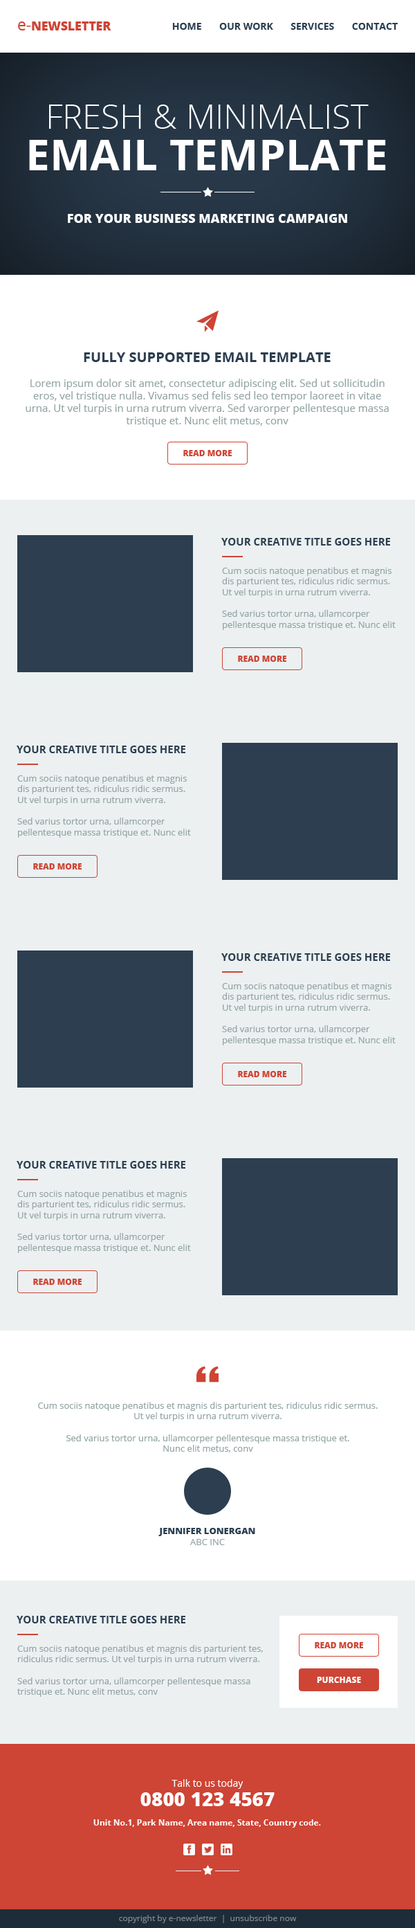
<style>
.page{position:relative;width:415px;height:1928px;background:#ecf0f1}
.page>*{position:absolute;margin:0}
.t1{font:12.2px "OpenSans-Extrabold";color:#ce4435;text-transform:uppercase}
.t2{font:15.7px "OpenSans";color:#ce4435}
.t3{font:9.7px "OpenSans-Bold";color:#2c3e50}
.t4{font:33.9px/41.5px "OpenSans-Light";color:#ffffff;text-transform:uppercase}
.t5{font:42.9px/41.5px "OpenSans-Bold";color:#ffffff;text-transform:uppercase}
.t6{font:12.5px "OpenSans-Extrabold";color:#ffffff;text-transform:uppercase}
.t7{font:13.8px "OpenSans-Bold";color:#2c3e50;text-transform:uppercase}
.t8{font:10.4px "OpenSans";color:#95a5a6}
.t9{font:8.3px "OpenSans-Extrabold";color:#ce4435;text-transform:uppercase}
.t10{font:10.4px "OpenSans-Bold";color:#2c3e50;text-transform:uppercase}
.t11{font:9px "OpenSans";color:#95a5a6}
.t12{font:9px "OpenSans-Extrabold";color:#2c3e50;text-transform:uppercase}
.t13{font:8.3px "OpenSans-Extrabold";color:#ffffff;text-transform:uppercase}
.t14{font:9.7px/19.4px "OpenSans";color:#ffffff}
.t15{font:19.4px/19.4px "OpenSans-Extrabold";color:#ffffff}
.t16{font:8.3px "OpenSans-Bold";color:#ffffff}
.t17{font:8.3px "OpenSans";color:#7f8c8d}
</style>
<div class="page">
<p class="t1" style="left:18px;top:21px;width:93px;height:9px"><span class="t2">e-</span>newsletter</p>
<p class="t3" style="left:172px;top:23px;width:226px;height:7px">HOME       OUR WORK       SERVICES       CONTACT</p>
<p class="t4" style="left:29px;top:105px;width:357px;height:65px;text-align:center">fresh &amp; minimalist<br><span class="t5">email template</span></p>
<p class="t6" style="left:68px;top:214px;width:280px;height:9px">for Your Business Marketing Campaign</p>
<p class="t7" style="left:84px;top:352px;width:247px;height:10px">fully supported email template</p>
<p class="t8" style="left:26px;top:379px;width:363px;height:48px;text-align:center">Lorem ipsum dolor sit amet, consectetur adipiscing elit. Sed ut sollicitudin eros, vel tristique nulla. Vivamus sed felis sed leo tempor laoreet in vitae urna. Ut vel turpis in urna rutrum viverra. Sed varorper pellentesque massa tristique et. Nunc elit metus, conv</p>
<p class="t9" style="left:183px;top:450px;width:49px;height:6px">READ MORE</p>
<p class="t10" style="left:222px;top:538px;width:168px;height:8px">your creative TITLE GOES HERE</p>
<p class="t11" style="left:222px;top:567px;width:174px;height:63px">Cum sociis natoque penatibus et magnis dis parturient tes, ridiculus ridic sermus. Ut vel turpis in urna rutrum viverra. <br><br>Sed varius tortor urna, ullamcorper pellentesque massa tristique et. Nunc elit metus, conv</p>
<p class="t9" style="left:238px;top:656px;width:49px;height:6px">READ MORE</p>
<p class="t10" style="left:17px;top:746px;width:169px;height:7px">your creative TITLE GOES HERE</p>
<p class="t11" style="left:17px;top:775px;width:174px;height:63px">Cum sociis natoque penatibus et magnis dis parturient tes, ridiculus ridic sermus. Ut vel turpis in urna rutrum viverra. <br><br>Sed varius tortor urna, ullamcorper pellentesque massa tristique et. Nunc elit metus, conv</p>
<p class="t9" style="left:33px;top:863px;width:49px;height:7px">READ MORE</p>
<p class="t10" style="left:222px;top:953px;width:168px;height:8px">your creative TITLE GOES HERE</p>
<p class="t11" style="left:222px;top:982px;width:174px;height:63px">Cum sociis natoque penatibus et magnis dis parturient tes, ridiculus ridic sermus. Ut vel turpis in urna rutrum viverra. <br><br>Sed varius tortor urna, ullamcorper pellentesque massa tristique et. Nunc elit metus, conv</p>
<p class="t9" style="left:238px;top:1071px;width:49px;height:6px">READ MORE</p>
<p class="t10" style="left:17px;top:1161px;width:169px;height:8px">your creative TITLE GOES HERE</p>
<p class="t11" style="left:17px;top:1190px;width:174px;height:63px">Cum sociis natoque penatibus et magnis dis parturient tes, ridiculus ridic sermus. Ut vel turpis in urna rutrum viverra. <br><br>Sed varius tortor urna, ullamcorper pellentesque massa tristique et. Nunc elit metus, conv</p>
<p class="t9" style="left:33px;top:1279px;width:49px;height:6px">READ MORE</p>
<p class="t11" style="left:38px;top:1402px;width:340px;height:50px;text-align:center">Cum sociis natoque penatibus et magnis dis parturient tes, ridiculus ridic sermus. Ut vel turpis in urna rutrum viverra. <br><br>Sed varius tortor urna, ullamcorper pellentesque massa tristique et. <br>Nunc elit metus, conv</p>
<p class="t12" style="left:159px;top:1528px;width:96px;height:17px;text-align:center">jennifer lonergan<br><span class="t11">ABC INC</span></p>
<p class="t10" style="left:17px;top:1616px;width:169px;height:7px">your creative TITLE GOES HERE</p>
<p class="t11" style="left:17px;top:1645px;width:246px;height:52px">Cum sociis natoque penatibus et magnis dis parturient tes, ridiculus ridic sermus. Ut vel turpis in urna rutrum viverra. <br><br>Sed varius tortor urna, ullamcorper pellentesque massa tristique et. Nunc elit metus, conv</p>
<p class="t9" style="left:315px;top:1642px;width:48px;height:6px">READ MORE</p>
<p class="t13" style="left:317px;top:1677px;width:44px;height:6px">PURCHASE</p>
<p class="t14" style="left:141px;top:1779px;width:134px;height:27px;text-align:center">Talk to us today<br><span class="t15">0800 123 4567</span></p>
<p class="t16" style="left:93px;top:1819px;width:228px;height:9px">Unit No.1, Park Name, Area name, State, Country code.</p>
<p class="t17" style="left:119px;top:1915px;width:178px;height:8px">copyright by e-newsletter  |  unsubscribe now</p>
</div>
